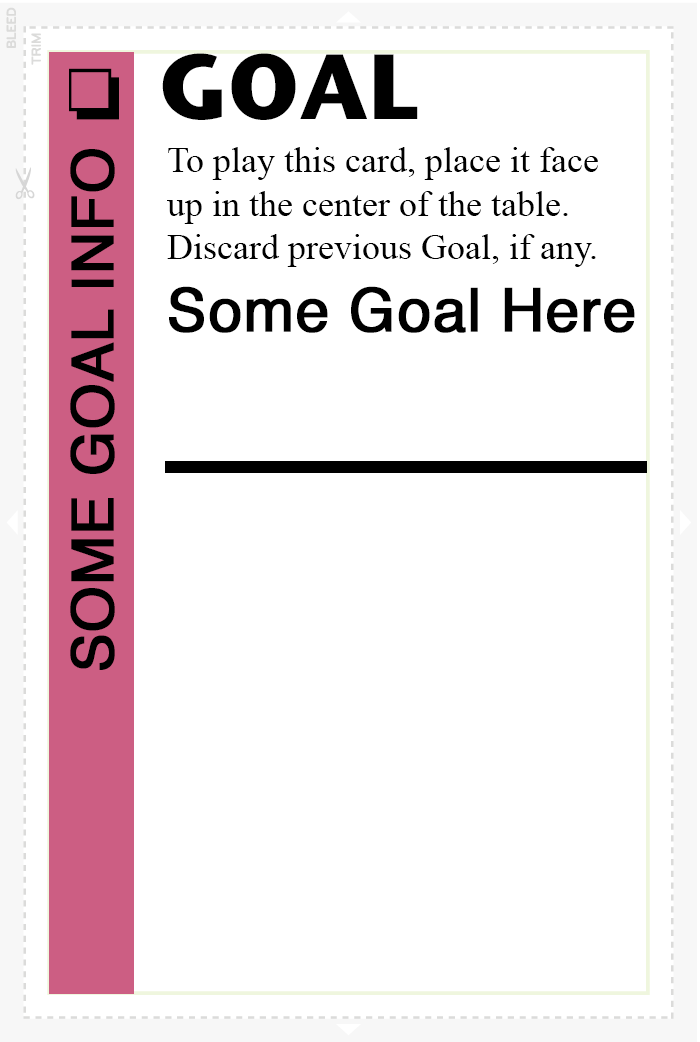
<style>
.page{position:relative;width:700px;height:1042px;background:#ffffff}
.page>*{position:absolute;margin:0}
.t1{font:92px "StoneSansITC-Bold";color:#000000}
.t2{font:72px "MS-Gothic";color:#000000}
.t3{font:58px "Helvetica";color:#000000;font-weight:bold}
.t4{font:36px "TimesNewRomanPSMT";color:#000000}
.t5{font:60px "Helvetica";color:#000000;font-weight:bold}
</style>
<div class="page">
<p class="t1" style="left:162px;top:53px;width:256px;height:67px">GOAL</p>
<p class="t2" style="left:69px;top:68px;width:50px;height:52px">❏</p>
<p class="t3" style="left:70px;top:149px;width:45px;height:521px;rotate:-90deg">SOME GOAL INFO</p>
<p class="t4" style="left:167px;top:147px;width:431px;height:120px">To play this card, place it face<br>up in the center of the table.<br>Discard previous Goal, if any.</p>
<p class="t5" style="left:169px;top:286px;width:466px;height:47px">Some Goal Here</p>
</div>
